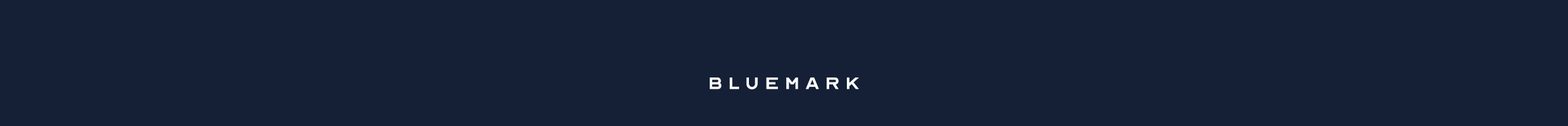
<style>
.page{position:relative;width:1568px;height:126px;background:#152037}
.page>*{position:absolute;margin:0}
.t1{font:22.8px "OpticianSans-Regular";letter-spacing:0.25em;color:#ffffff}
</style>
<div class="page">
<p class="t1" style="left:710px;top:78px;width:149px;height:12px">BLUEMARK</p>
</div>
